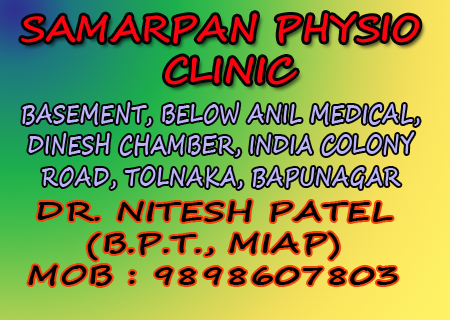
<style>
.page{position:relative;width:450px;height:320px}
.page>*{position:absolute;margin:0}
.t1{font:35.5px "SegoeScript-Bold";color:#fb0410}
.t2{font:26px "SegoeScript-Bold";color:#bbb4fa;scale:0.77 1}
.t3{font:26.8px "SegoeScript-Bold";color:#030303;scale:1.27 1}
</style>
<div class="page">
<p class="t1" style="left:21px;top:13px;width:399px;height:72px;text-align:center">SAMARPAN PHYSIO <br>CLINIC</p>
<p class="t2" style="left:22px;top:102px;width:398px;height:87px;text-align:center">BASEMENT, BELOW ANIL MEDICAL,<br>DINESH CHAMBER, INDIA COLONY<br>ROAD, TOLNAKA, BAPUNAGAR</p>
<p class="t3" style="left:28px;top:200px;width:370px;height:86px;text-align:center">DR. NITESH PATEL<br>(B.P.T., MIAP)<br>MOB : 9898607803</p>
</div>
